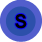
<style>
.page{position:relative;width:42px;height:42px;background:#525ecc}
.page>*{position:absolute;margin:0}
.t1{font:19.2px "Arial-BoldMT";color:#000000}
</style>
<div class="page">
<p class="t1" style="left:15px;top:14px;width:12px;height:15px">S</p>
</div>
